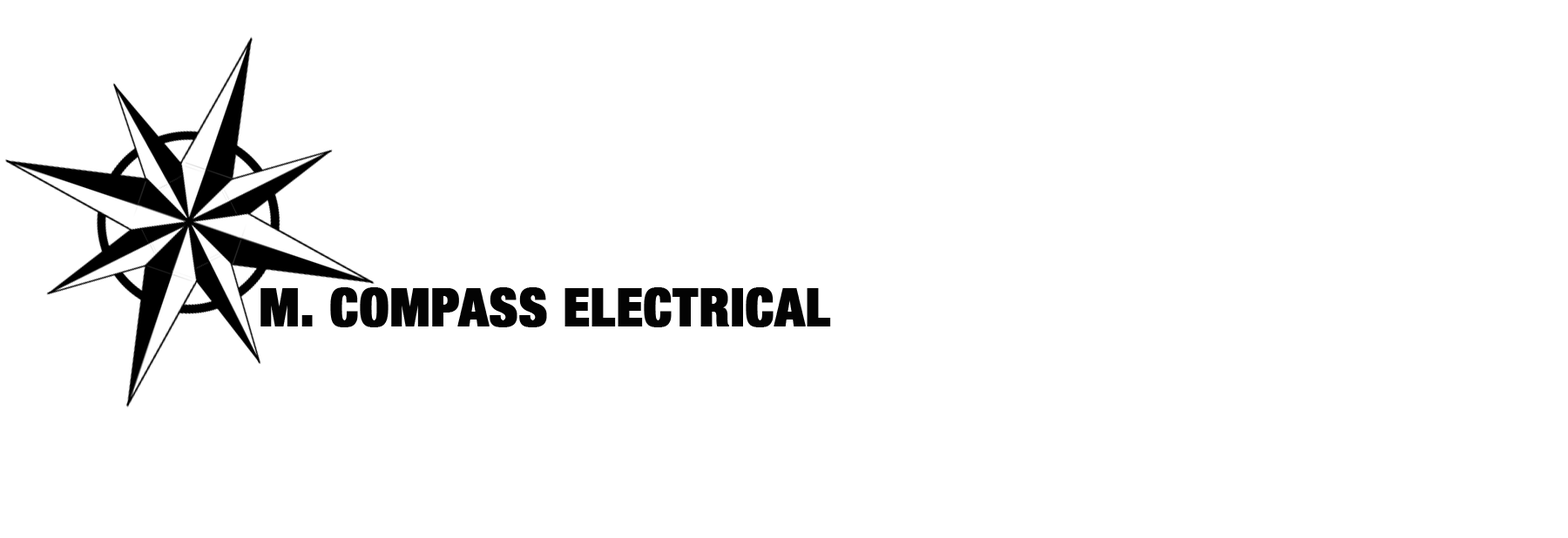
<style>
.page{position:relative;width:1568px;height:538px;background:#ffffff}
.page>*{position:absolute;margin:0}
.t1{font:52.3px "HelveticaNeue-CondensedBlack";color:#030303;font-weight:bold}
</style>
<div class="page">
<p class="t1" style="left:260px;top:287px;width:571px;height:41px">M. COMPASS ELECTRICAL</p>
</div>
